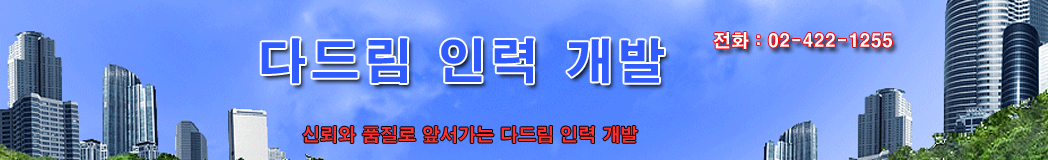
<style>
.page{position:relative;width:1048px;height:160px}
.page>*{position:absolute;margin:0}
.t1{font:48px "H2gtrE";letter-spacing:0.1em;color:#2f5bff}
.t2{font:18px "H2gtrE";color:#ffffff}
.t3{font:18px "H2gtrE";color:#ff2f2f}
</style>
<div class="page">
<p class="t1" style="left:261px;top:38px;width:403px;height:46px">다드림 인력 개발</p>
<p class="t2" style="left:713px;top:32px;width:179px;height:17px">전화 : 02-422-1255</p>
<p class="t3" style="left:302px;top:126px;width:336px;height:17px">신뢰와 품질로 앞서가는 다드림 인력 개발</p>
</div>
